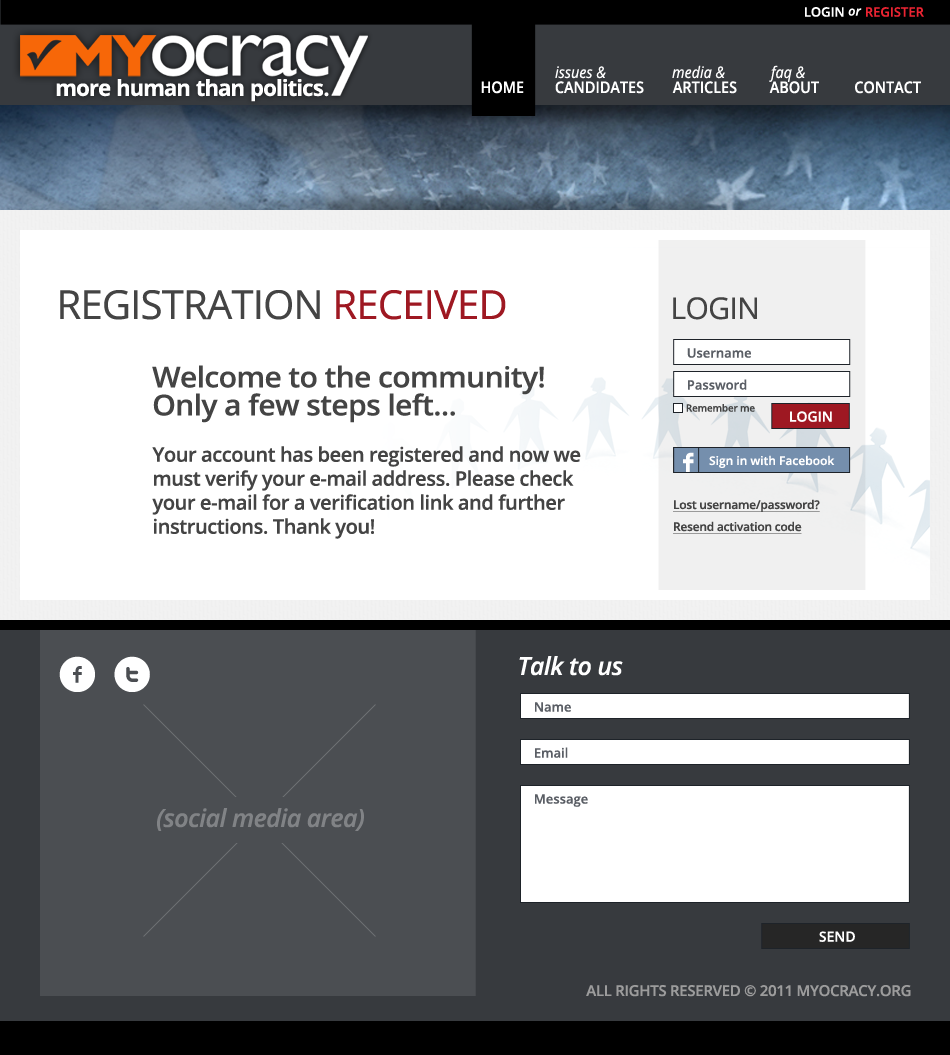
<style>
.page{position:relative;width:950px;height:1055px;background:#ffffff}
.page>*{position:absolute;margin:0}
.t1{font:13px "OpenSans-Semibold";color:#ffffff;text-transform:uppercase}
.t2{font:13px "OpenSans-SemiboldItalic";color:#ffffff}
.t3{font:13px "OpenSans-Semibold";color:#ec2432;text-transform:uppercase}
.t4{font:16px "OpenSans-Italic";color:#ffffff;scale:0.9 1}
.t5{font:22.2px "OpenSans-Bold";letter-spacing:-0.02em;color:#ffffff}
.t6{font:16px "OpenSans-Semibold";color:#ffffff;text-transform:uppercase;scale:0.9 1}
.t7{font:40px "OpenSans";letter-spacing:-0.02em;color:#444444;text-transform:uppercase}
.t8{font:40px "OpenSans";letter-spacing:-0.02em;color:#9e1822;text-transform:uppercase}
.t9{font:30px "OpenSans";letter-spacing:-0.02em;color:#444444;text-transform:uppercase}
.t10{font:13px "OpenSans-Semibold";color:#5a5e65}
.t11{font:28.5px/28px "OpenSans-Semibold";letter-spacing:-0.02em;color:#444444;scale:1.05 1}
.t12{font:10px "OpenSans-Semibold";letter-spacing:-0.02em;color:#444444}
.t13{font:14px "OpenSans-Semibold";color:#ffffff}
.t14{font:20px "OpenSans-Semibold";letter-spacing:-0.02em;color:#444444}
.t15{font:31px "Socialico";color:#ffffff}
.t16{font:12px "OpenSans-Semibold";color:#ffffff}
.t17{font:12px "OpenSans-Semibold";letter-spacing:-0.02em;color:#444444;text-decoration:underline}
.t18{font:50px "Socialico";letter-spacing:0.3em;color:#ffffff}
.t19{font:25px "OpenSans-SemiboldItalic";letter-spacing:-0.02em;color:#ffffff}
.t20{font:25px "OpenSans-SemiboldItalic";letter-spacing:-0.02em;color:#818386}
.t21{font:15px "OpenSans-Semibold";letter-spacing:-0.02em;color:#9c9c9c;text-transform:uppercase}
</style>
<div class="page">
<p class="t1" style="left:805px;top:7px;width:57px;height:10px">Login <span class="t2">or</span></p>
<p class="t3" style="left:866px;top:7px;width:58px;height:10px">Register</p>
<p class="t4" style="left:672px;top:65px;width:53px;height:14px">media &amp;</p>
<p class="t4" style="left:769px;top:65px;width:36px;height:17px">faq &amp;</p>
<p class="t4" style="left:555px;top:66px;width:51px;height:13px">issues &amp;</p>
<p class="t5" style="left:56px;top:79px;width:273px;height:23px">more human than politics.</p>
<p class="t6" style="left:481px;top:81px;width:43px;height:13px">home</p>
<p class="t6" style="left:555px;top:81px;width:89px;height:13px">candidates</p>
<p class="t6" style="left:672px;top:81px;width:65px;height:13px">articles</p>
<p class="t6" style="left:769px;top:81px;width:50px;height:13px">ABOUT</p>
<p class="t6" style="left:855px;top:81px;width:66px;height:13px">contact</p>
<p class="t7" style="left:60px;top:290px;width:446px;height:30px">Registration <span class="t8">received</span></p>
<p class="t9" style="left:673px;top:297px;width:84px;height:23px">login</p>
<p class="t10" style="left:687px;top:348px;width:64px;height:10px">Username</p>
<p class="t11" style="left:152px;top:365px;width:392px;height:58px">Welcome to the community! Only a few steps left...</p>
<p class="t10" style="left:688px;top:379px;width:59px;height:11px">Password</p>
<p class="t12" style="left:686px;top:404px;width:69px;height:8px">Remember me</p>
<p class="t13" style="left:790px;top:411px;width:42px;height:11px">LOGIN</p>
<p class="t14" style="left:152px;top:446px;width:429px;height:93px">Your account has been registered and now we must verify your e-mail address. Please check your e-mail for a verification link and further instructions. Thank you!</p>
<p class="t15" style="left:683px;top:452px;width:11px;height:20px">F</p>
<p class="t16" style="left:709px;top:455px;width:126px;height:13px">Sign in with Facebook</p>
<p class="t17" style="left:673px;top:499px;width:147px;height:13px">Lost username/password?</p>
<p class="t17" style="left:673px;top:521px;width:129px;height:13px">Resend activation code</p>
<p class="t18" style="left:59px;top:656px;width:91px;height:36px">ft</p>
<p class="t19" style="left:519px;top:656px;width:104px;height:20px">Talk to us</p>
<p class="t10" style="left:535px;top:702px;width:36px;height:10px">Name</p>
<p class="t10" style="left:535px;top:747px;width:33px;height:11px">Email</p>
<p class="t10" style="left:535px;top:794px;width:53px;height:13px">Message</p>
<p class="t20" style="left:157px;top:808px;width:207px;height:23px">(social media area)</p>
<p class="t13" style="left:819px;top:931px;width:36px;height:11px">SEND</p>
<p class="t21" style="left:586px;top:985px;width:325px;height:12px">all rights reserved © 2011 myocracy.org</p>
</div>
